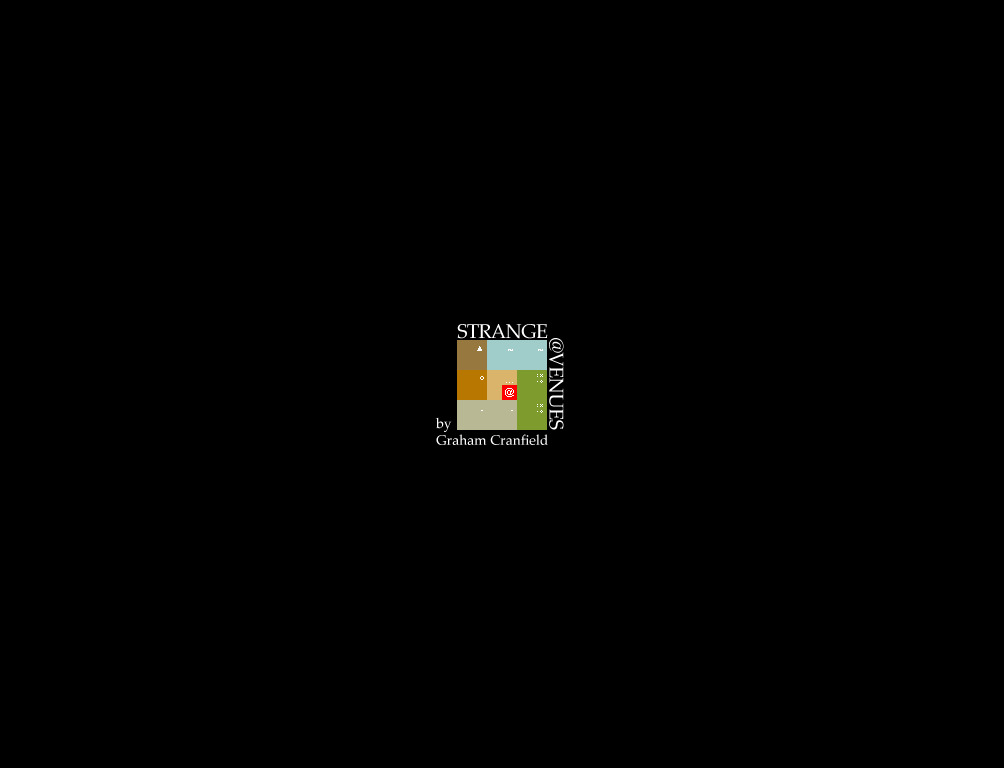
<style>
.page{position:relative;width:1004px;height:768px;background:#000000}
.page>*{position:absolute;margin:0}
.t1{font:20px "PalatinoLinotype-Roman";letter-spacing:-0.04em;color:#ffffff}
.t2{font:23px "PalatinoLinotype-Roman";letter-spacing:-0.04em;color:#ffffff}
.t3{font:14px "PalatinoLinotype-Roman";color:#ffffff}
</style>
<div class="page">
<p class="t1" style="left:457px;top:324px;width:91px;height:15px">STRANGE</p>
<p class="t1" style="left:549px;top:338px;width:15px;height:92px;rotate:90deg"><span class="t2">@</span>VENUES</p>
<p class="t3" style="left:435px;top:417px;width:113px;height:28px">by<br>Graham Cranfield</p>
</div>
